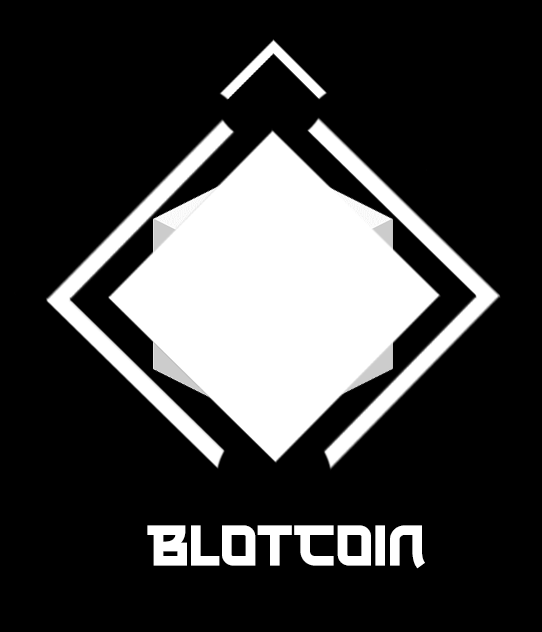
<style>
.page{position:relative;width:542px;height:632px;background:#000000}
.page>*{position:absolute;margin:0}
.t1{font:53.4px "TheLastShuriken-Regular";color:#ffffff}
</style>
<div class="page">
<p class="t1" style="left:147px;top:525px;width:278px;height:44px">BlotCoin</p>
</div>
